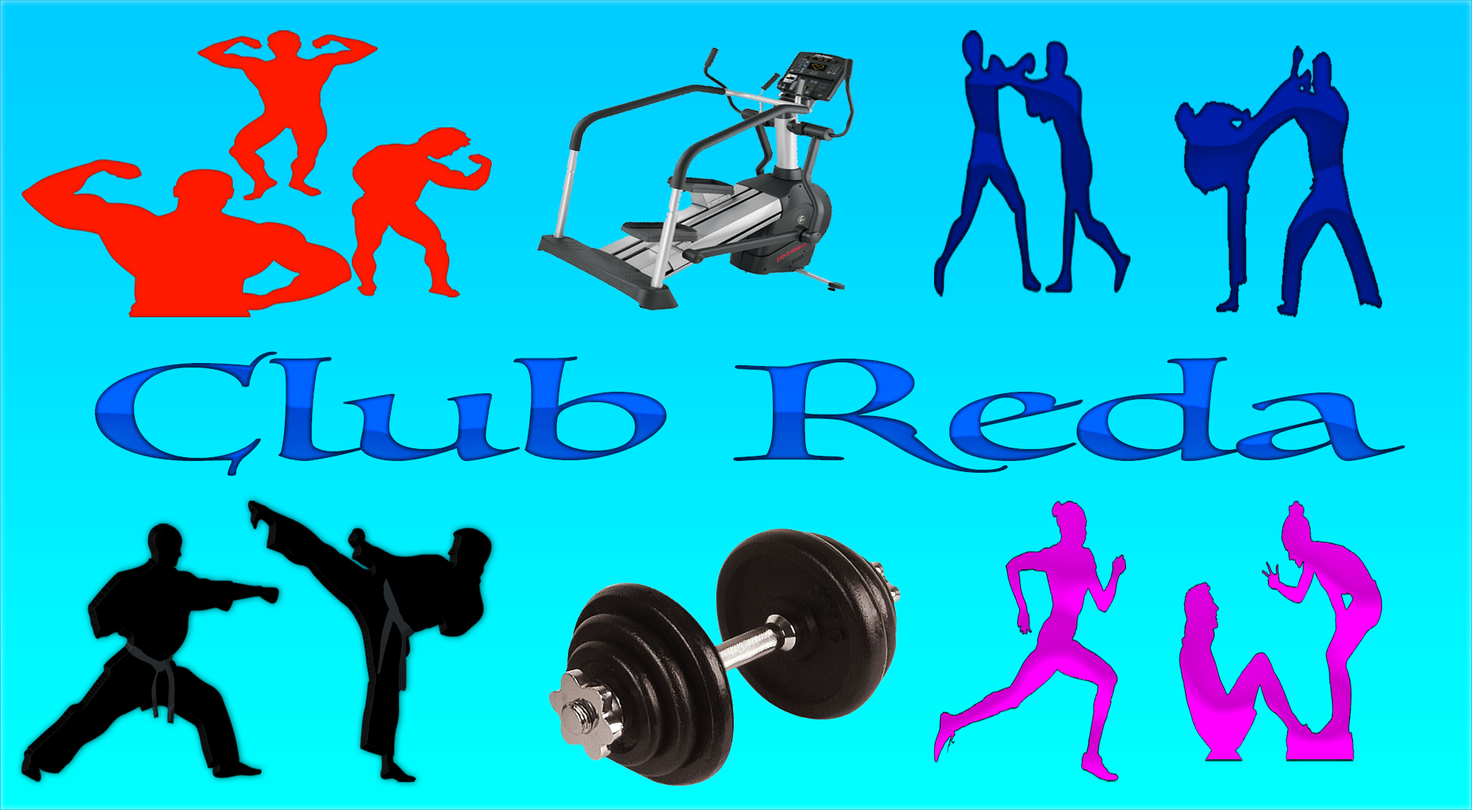
<style>
.page{position:relative;width:1472px;height:810px}
.page>*{position:absolute;margin:0}
.t1{font:135px "Luminari-Regular";scale:2.03 1}
</style>
<div class="page">
<p class="t1" style="left:95px;top:351px;width:1311px;height:125px">Club Reda</p>
</div>
